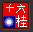
<style>
.page{position:relative;width:33px;height:32px;background:#f20000}
.page>*{position:absolute;margin:0}
.t1{font:10.4px "SimSun";color:#ffffff}
.t2{font:11.7px "SimSun";color:#ffffff}
</style>
<div class="page">
<p class="t1" style="left:6px;top:4px;width:19px;height:9px">十六</p>
<p class="t2" style="left:16px;top:15px;width:11px;height:12px">桂</p>
</div>
